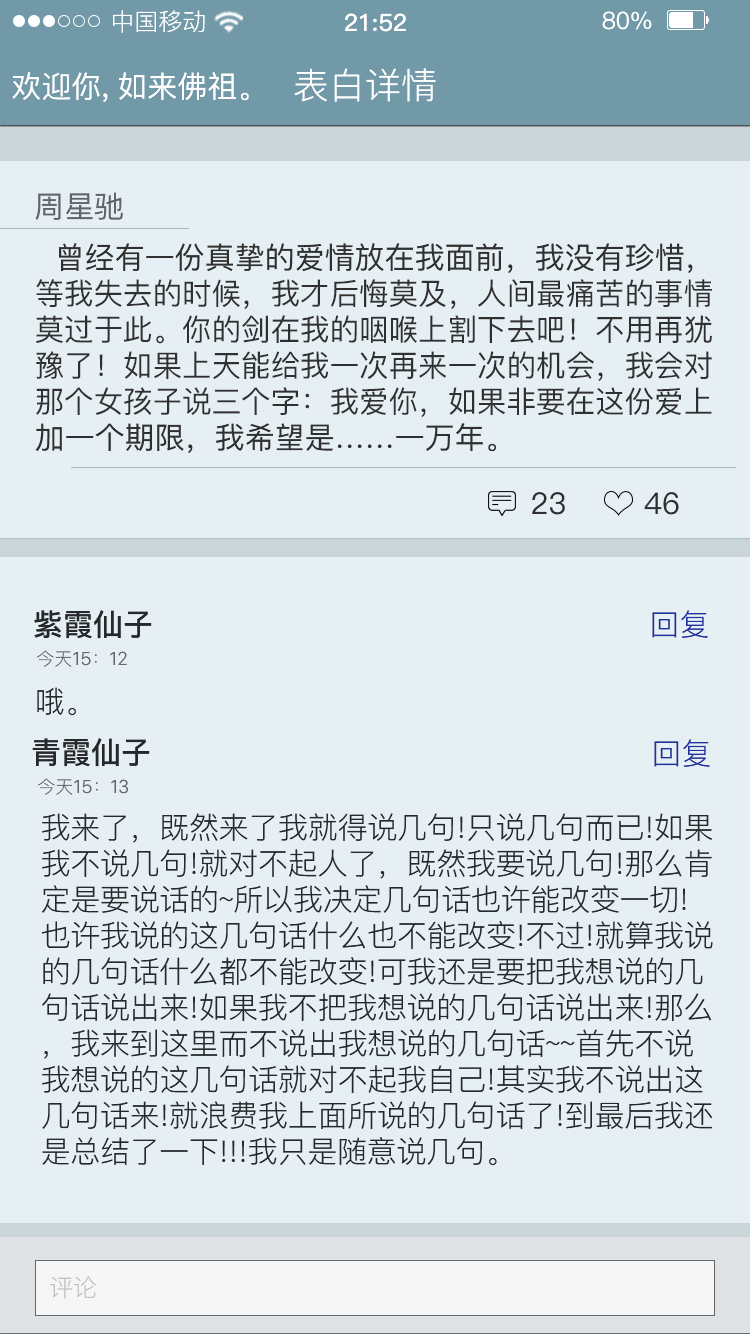
<style>
.page{position:relative;width:750px;height:1334px;background:#e6eff3}
.page>*{position:absolute;margin:0}
.t1{font:24px "PingFang-SC-Regular";color:#ffffff}
.t2{font:24px "PingFang-SC-Bold";color:#ffffff}
.t3{font:24px "PingFang-SC-Medium";color:#ffffff}
.t4{font:30px "PingFang-SC-Medium";color:#ffffff}
.t5{font:36px "PingFang-SC-Regular";color:#ffffff}
.t6{font:30px "PingFang-SC-Medium";color:#60656b}
.t7{font:30px "PingFang-SC-Medium";color:#303030}
.t8{font:30px "PingFang-SC-Bold";color:#26282b}
.t9{font:30px "PingFang-SC-Regular";color:#1f329f}
.t10{font:18px "PingFang-SC-Regular";color:#64686c}
.t11{font:18px "HelveticaNeueDeskInterface-Regular";color:#64686c}
.t12{font:30px "PingFang-SC-Regular";color:#26282b}
.t13{font:24px "PingFang-SC-Regular";color:#c5c1c1}
</style>
<div class="page">
<p class="t1" style="left:113px;top:10px;width:92px;height:23px">中国移动</p>
<p class="t2" style="left:345px;top:13px;width:61px;height:19px">21:52</p>
<p class="t3" style="left:602px;top:11px;width:50px;height:19px">80%</p>
<p class="t4" style="left:12px;top:72px;width:96px;height:30px">欢迎你,</p>
<p class="t4" style="left:119px;top:72px;width:130px;height:29px">如来佛祖。</p>
<p class="t5" style="left:294px;top:68px;width:142px;height:34px">表白详情</p>
<p class="t5" style="left:294px;top:68px;width:142px;height:34px">表白详情</p>
<p class="t6" style="left:35px;top:192px;width:88px;height:28px">周星驰</p>
<p class="t7" style="left:35px;top:243px;width:677px;height:210px">曾经有一份真挚的爱情放在我面前，我没有珍惜，<br>等我失去的时候，我才后悔莫及，人间最痛苦的事情<br>莫过于此。你的剑在我的咽喉上割下去吧！不用再犹<br>豫了！如果上天能给我一次再来一次的机会，我会对<br>那个女孩子说三个字：我爱你，如果非要在这份爱上<br>加一个期限，我希望是……一万年。</p>
<p class="t7" style="left:532px;top:492px;width:33px;height:23px">23</p>
<p class="t7" style="left:644px;top:492px;width:35px;height:23px">46</p>
<p class="t8" style="left:34px;top:610px;width:118px;height:29px">紫霞仙子</p>
<p class="t9" style="left:652px;top:610px;width:56px;height:28px">回复</p>
<p class="t10" style="left:37px;top:650px;width:90px;height:17px">今天<span class="t11">15</span>：<span class="t11">12</span></p>
<p class="t12" style="left:37px;top:687px;width:39px;height:29px">哦。</p>
<p class="t8" style="left:32px;top:738px;width:118px;height:29px">青霞仙子</p>
<p class="t9" style="left:654px;top:739px;width:56px;height:28px">回复</p>
<p class="t10" style="left:38px;top:778px;width:90px;height:17px">今天<span class="t11">15</span>：<span class="t11">13</span></p>
<p class="t12" style="left:42px;top:813px;width:671px;height:353px">我来了，既然来了我就得说几句!只说几句而已!如果我不说几句!就对不起人了，既然我要说几句!那么肯定是要说话的~所以我决定几句话也许能改变一切!也许我说的这几句话什么也不能改变!不过!就算我说的几句话什么都不能改变!可我还是要把我想说的几句话说出来!如果我不把我想说的几句话说出来!那么，我来到这里而不说出我想说的几句话~~首先不说我想说的这几句话就对不起我自己!其实我不说出这几句话来!就浪费我上面所说的几句话了!到最后我还是总结了一下!!!我只是随意说几句。</p>
<p class="t13" style="left:50px;top:1276px;width:47px;height:23px">评论</p>
</div>
